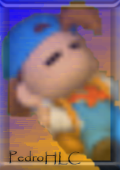
<style>
.page{position:relative;width:120px;height:170px}
.page>*{position:absolute;margin:0}
.t1{font:13px "Papyrus-Regular";font-weight:bold}
</style>
<div class="page">
<p class="t1" style="left:9px;top:150px;width:72px;height:15px;rotate:1deg">PedroHLC</p>
</div>
